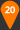
<style>
.page{position:relative;width:20px;height:30px;background:#ff7800}
.page>*{position:absolute;margin:0}
.t1{font:9px "OpenSans";color:#ffffff;font-weight:bold}
</style>
<div class="page">
<p class="t1" style="left:5px;top:6px;width:10px;height:8px">20</p>
</div>
